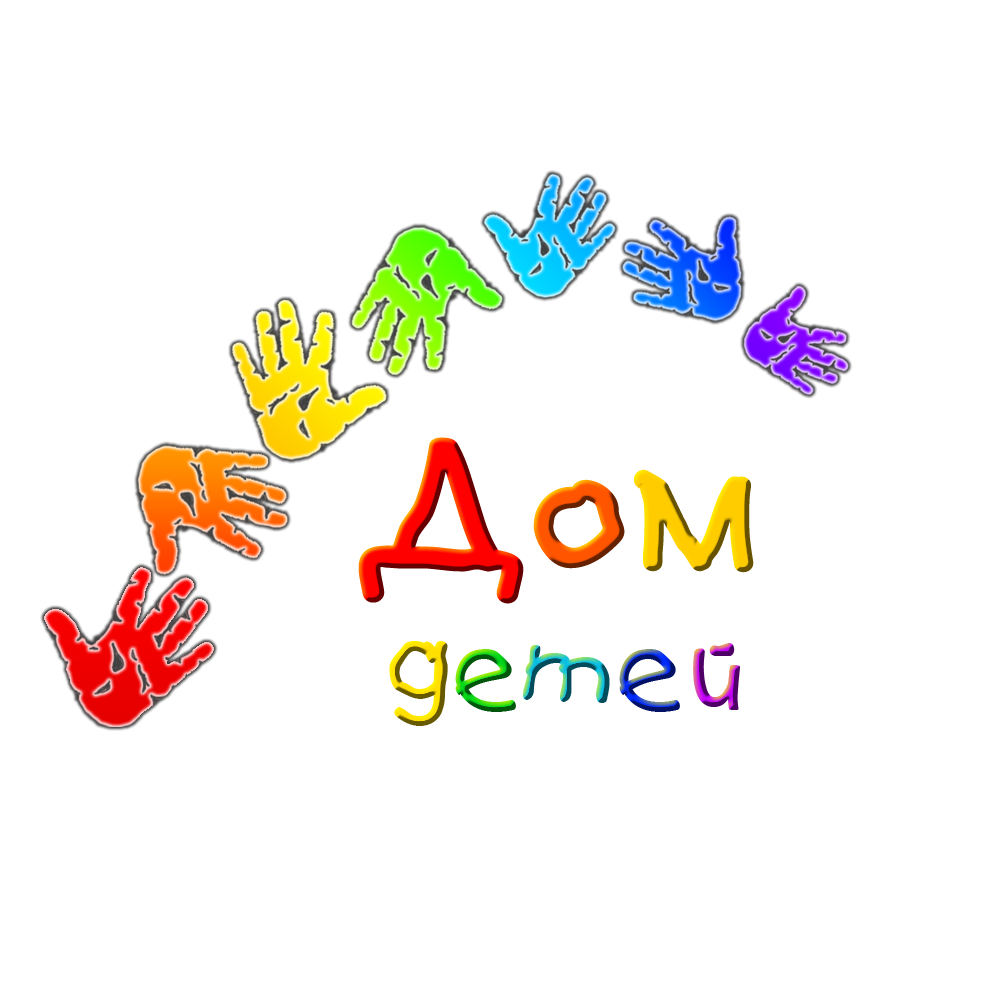
<style>
.page{position:relative;width:1000px;height:1000px;background:#ffffff}
.page>*{position:absolute;margin:0}
.t1{font:170px "Teslic`sDocument";color:#ff0000;font-weight:bold}
.t2{font:150px "Teslic`sDocument";color:#ff5400;font-weight:bold}
.t3{font:150px "Teslic`sDocument";color:#ffcc00;font-weight:bold}
.t4{font:100px "Teslic`sDocument"}
</style>
<div class="page">
<p class="t1" style="left:358px;top:437px;width:396px;height:167px">Д<span class="t2">о</span><span class="t3">м</span></p>
<p class="t4" style="left:389px;top:641px;width:351px;height:85px">детей</p>
</div>
